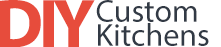
<style>
.page{position:relative;width:221px;height:47px;background:#ffffff}
.page>*{position:absolute;margin:0}
.t1{font:69px "MyriadPro-Bold";letter-spacing:-0.06em;color:#e74c3c}
.t2{font:32px/24px "MyriadPro-Regular";color:#323a45}
</style>
<div class="page">
<p class="t1" style="left:0px;top:0px;width:95px;height:48px">DIY</p>
<p class="t2" style="left:96px;top:0px;width:113px;height:46px">Custom<br>Kitchens</p>
</div>
